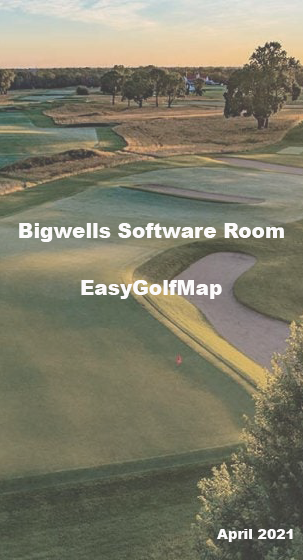
<style>
.page{position:relative;width:303px;height:560px}
.page>*{position:absolute;margin:0}
.t1{font:20px "Arial-Black";color:#fbfafa}
.t2{font:14px "Arial-Black";color:#fbfafa}
</style>
<div class="page">
<p class="t1" style="left:19px;top:223px;width:265px;height:19px">Bigwells Software Room</p>
<p class="t1" style="left:81px;top:280px;width:141px;height:19px">EasyGolfMap</p>
<p class="t2" style="left:217px;top:529px;width:76px;height:13px">April 2021</p>
</div>
